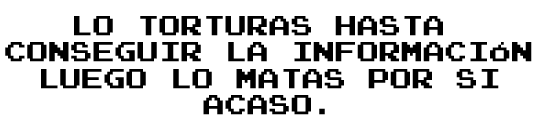
<style>
.page{position:relative;width:539px;height:131px;background:#ffffff}
.page>*{position:absolute;margin:0}
.t1{font:22px "PressStart2P";color:#000000}
</style>
<div class="page">
<p class="t1" style="left:5px;top:16px;width:527px;height:99px;text-align:center">LO TORTURAS HASTA <br>CONSEGUIR LA INFORMACIÓN<br>LUEGO LO MATAS POR SI<br>ACASO.</p>
</div>
